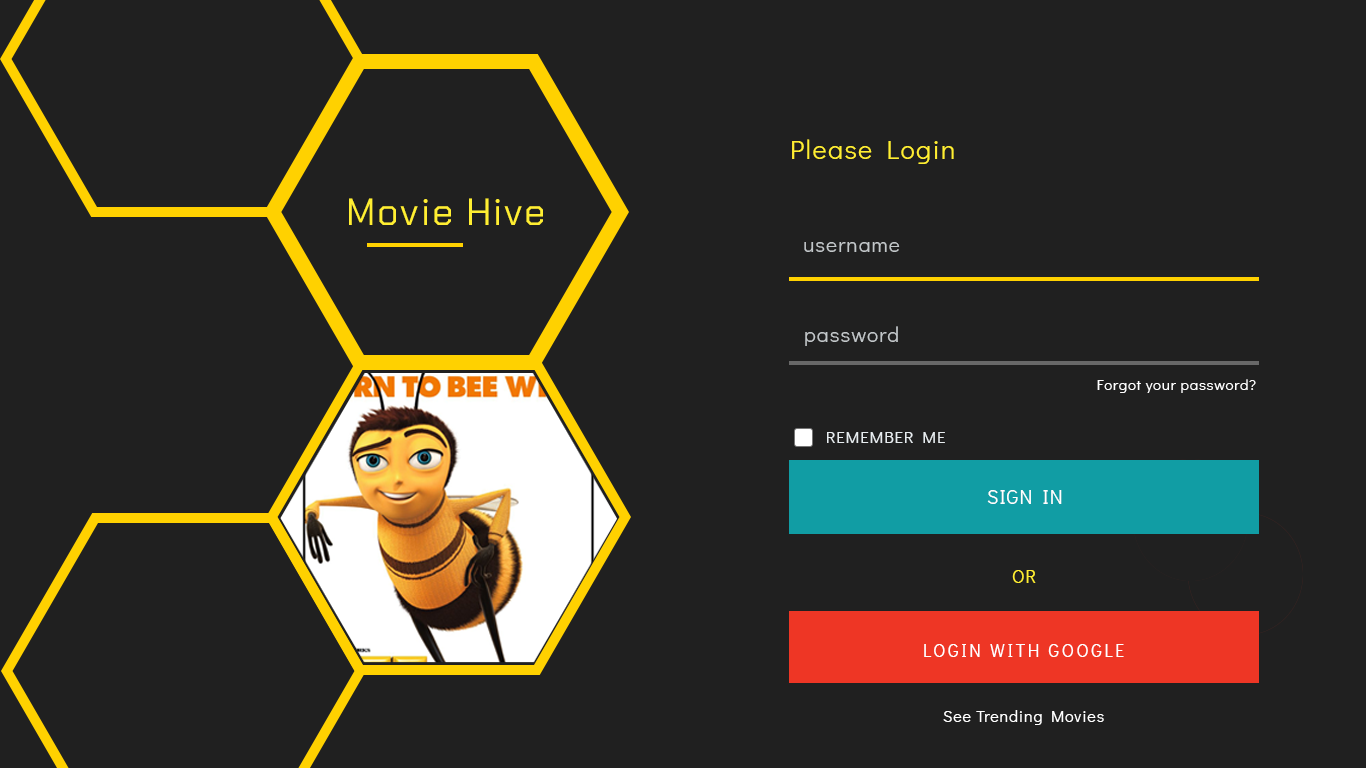
<style>
.page{position:relative;width:1366px;height:768px;background:#202020}
.page>*{position:absolute;margin:0}
.t1{font:26.9px "DidactGothic-Regular";letter-spacing:0.05em;color:#ffee32}
.t2{font:37.8px "ChakraPetch-Regular";letter-spacing:0.05em;color:#ffee32}
.t3{font:21px "DidactGothic-Regular";letter-spacing:0.05em;color:#c2c7c9}
.t4{font:15px "DidactGothic-Regular";letter-spacing:0.05em;color:#ffffff}
.t5{font:16.8px "DidactGothic-Regular";letter-spacing:0.05em;color:#e7ecef;text-transform:uppercase}
.t6{font:19.6px "DidactGothic-Regular";letter-spacing:0.05em;color:#ffffff;text-transform:uppercase}
.t7{font:18.1px "DidactGothic-Regular";letter-spacing:0.05em;color:#ffee32}
.t8{font:17.5px "DidactGothic-Regular";letter-spacing:0.15em;color:#ffffff}
.t9{font:16.1px "DidactGothic-Regular";letter-spacing:0.05em;color:#ffffff}
</style>
<div class="page">
<p class="t1" style="left:792px;top:139px;width:162px;height:25px">Please Login</p>
<p class="t2" style="left:349px;top:198px;width:194px;height:27px">Movie Hive</p>
<p class="t3" style="left:804px;top:242px;width:96px;height:10px">username</p>
<p class="t3" style="left:805px;top:326px;width:93px;height:20px">password</p>
<p class="t4" style="left:1097px;top:379px;width:159px;height:14px">Forgot your password?</p>
<p class="t5" style="left:827px;top:432px;width:118px;height:11px">Remember me</p>
<p class="t6" style="left:987px;top:490px;width:75px;height:14px">Sign in</p>
<p class="t7" style="left:1012px;top:570px;width:24px;height:13px">OR</p>
<p class="t8" style="left:924px;top:644px;width:200px;height:13px">LOGIN WITH GOOGLE</p>
<p class="t9" style="left:943px;top:710px;width:161px;height:15px">See Trending Movies</p>
</div>
